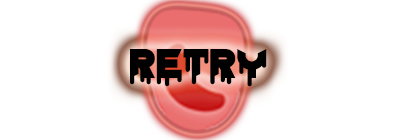
<style>
.page{position:relative;width:406px;height:140px;background:#ffffff}
.page>*{position:absolute;margin:0}
.t1{font:42.1px "ThrashDecision";color:#000000}
</style>
<div class="page">
<p class="t1" style="left:130px;top:49px;width:137px;height:38px">retry</p>
</div>
